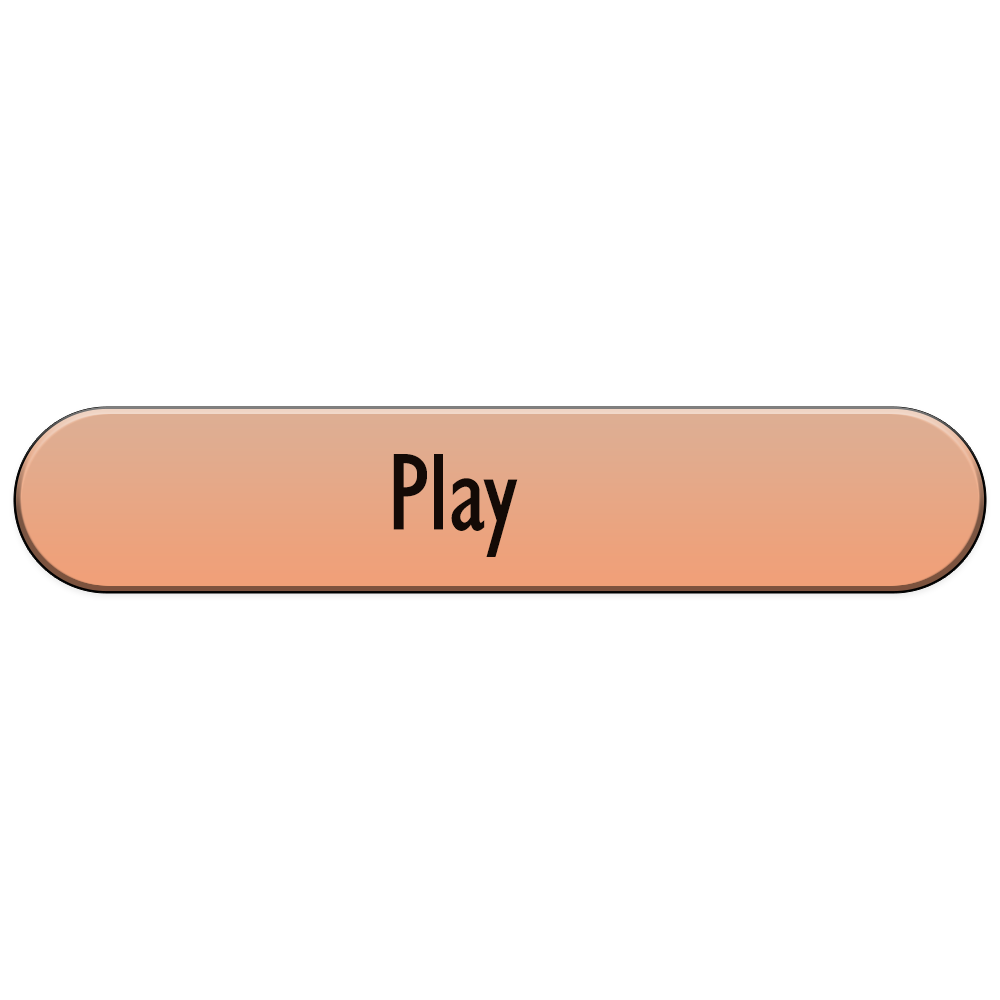
<style>
.page{position:relative;width:1000px;height:1000px;background:#ffffff}
.page>*{position:absolute;margin:0}
.t1{font:112.5px "GillSansMT-Condensed";color:#130a06}
</style>
<div class="page">
<p class="t1" style="left:393px;top:454px;width:125px;height:103px">Play</p>
</div>
